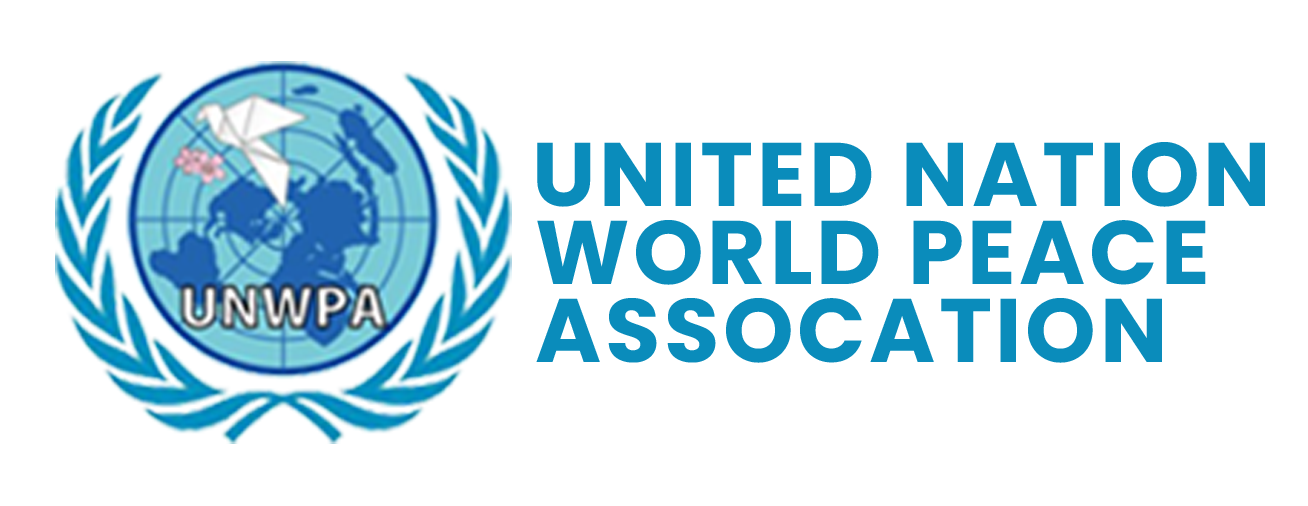
<style>
.page{position:relative;width:1308px;height:506px;background:#ffffff}
.page>*{position:absolute;margin:0}
.t1{font:90px "Poppins-Bold";letter-spacing:0.04em;color:#0a8cbb;text-transform:uppercase}
</style>
<div class="page">
<p class="t1" style="left:537px;top:142px;width:728px;height:65px">United Nation</p>
<p class="t1" style="left:537px;top:220px;width:669px;height:65px">WORLD PEACE</p>
<p class="t1" style="left:536px;top:298px;width:626px;height:65px">ASSOCATION</p>
</div>
